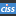
<style>
.page{position:relative;width:16px;height:16px;background:#4088cf}
.page>*{position:absolute;margin:0}
.t1{font:10px "Myriad-BoldItalic";letter-spacing:-0.025em;color:#ffffff}
</style>
<div class="page">
<p class="t1" style="left:1px;top:4px;width:14px;height:8px">ciss</p>
</div>
